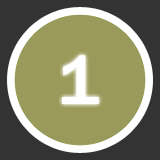
<style>
.page{position:relative;width:160px;height:160px;background:#9a9a5a}
.page>*{position:absolute;margin:0}
.t1{font:72px "FranklinGothic-Medium";color:#ffffff}
</style>
<div class="page">
<p class="t1" style="left:62px;top:55px;width:37px;height:49px">1</p>
</div>
